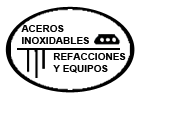
<style>
.page{position:relative;width:179px;height:125px;background:#ffffff}
.page>*{position:absolute;margin:0}
.t1{font:10px "Arial-BoldMT";color:#000000}
</style>
<div class="page">
<p class="t1" style="left:21px;top:25px;width:68px;height:19px">ACEROS <br>INOXIDABLES</p>
<p class="t1" style="left:53px;top:53px;width:73px;height:20px">REFACCIONES<br>Y EQUIPOS</p>
</div>
